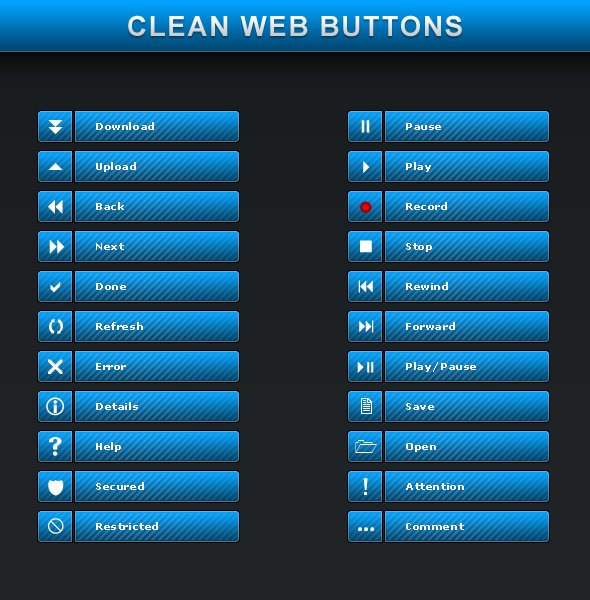
<style>
.page{position:relative;width:590px;height:600px}
.page>*{position:absolute;margin:0}
.t1{font:27.8px "Arial-BoldMT";letter-spacing:0.06em;text-transform:uppercase}
.t2{font:9.7px "Verdana-Bold";letter-spacing:0.06em;color:#ffffff}
.t3{font:25px "FranklinGothic-Medium";color:#ffffff}
.t4{font:25px "ArnoPro-Bold";color:#ffffff}
</style>
<div class="page">
<p class="t1" style="left:128px;top:15px;width:334px;height:22px">Clean Web Buttons</p>
<p class="t2" style="left:96px;top:122px;width:58px;height:8px">Download</p>
<p class="t2" style="left:406px;top:123px;width:35px;height:7px">Pause</p>
<p class="t2" style="left:96px;top:162px;width:40px;height:10px">Upload</p>
<p class="t2" style="left:406px;top:162px;width:25px;height:10px">Play</p>
<p class="t2" style="left:96px;top:202px;width:28px;height:8px">Back</p>
<p class="t2" style="left:406px;top:202px;width:41px;height:8px">Record</p>
<p class="t2" style="left:96px;top:243px;width:28px;height:7px">Next</p>
<p class="t2" style="left:406px;top:243px;width:26px;height:9px">Stop</p>
<p class="t2" style="left:96px;top:283px;width:30px;height:7px">Done</p>
<p class="t2" style="left:406px;top:282px;width:42px;height:8px">Rewind</p>
<p class="t2" style="left:96px;top:322px;width:47px;height:8px">Refresh</p>
<p class="t2" style="left:406px;top:322px;width:49px;height:8px">Forward</p>
<p class="t2" style="left:96px;top:363px;width:30px;height:7px">Error</p>
<p class="t2" style="left:406px;top:362px;width:70px;height:10px">Play/Pause</p>
<p class="t2" style="left:96px;top:402px;width:42px;height:8px">Details</p>
<p class="t2" style="left:406px;top:403px;width:28px;height:7px">Save</p>
<p class="t2" style="left:96px;top:442px;width:25px;height:10px">Help</p>
<p class="t2" style="left:406px;top:443px;width:30px;height:9px">Open</p>
<p class="t2" style="left:96px;top:482px;width:48px;height:8px">Secured</p>
<p class="t3" style="left:363px;top:478px;width:5px;height:17px">!</p>
<p class="t2" style="left:406px;top:483px;width:58px;height:7px">Attention</p>
<p class="t2" style="left:96px;top:522px;width:62px;height:8px">Restricted</p>
<p class="t4" style="left:358px;top:527px;width:17px;height:5px">...</p>
<p class="t2" style="left:406px;top:523px;width:58px;height:7px">Comment</p>
</div>
